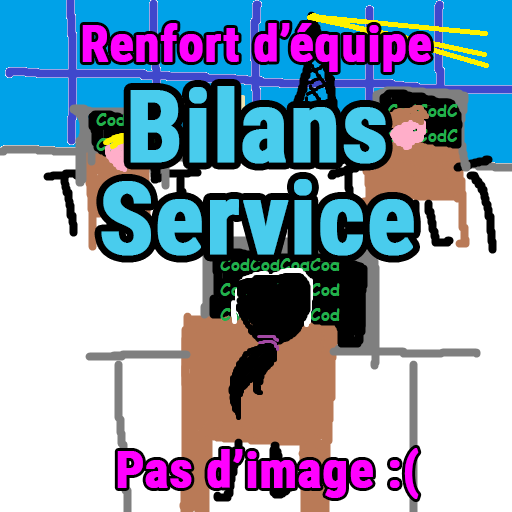
<style>
.page{position:relative;width:512px;height:512px;background:#ffffff}
.page>*{position:absolute;margin:0}
.t1{font:50px "RobotoCondensed-Bold";color:#ff00ff;font-weight:bold}
.t2{font:100px/91.7px "RobotoCondensed-Bold";color:#49cced;font-weight:bold}
</style>
<div class="page">
<p class="t1" style="left:82px;top:23px;width:349px;height:49px">Renfort d’équipe</p>
<p class="t2" style="left:101px;top:86px;width:313px;height:170px;text-align:center">Bilans<br>Service</p>
<p class="t1" style="left:117px;top:448px;width:302px;height:51px">Pas d’image :(</p>
</div>
